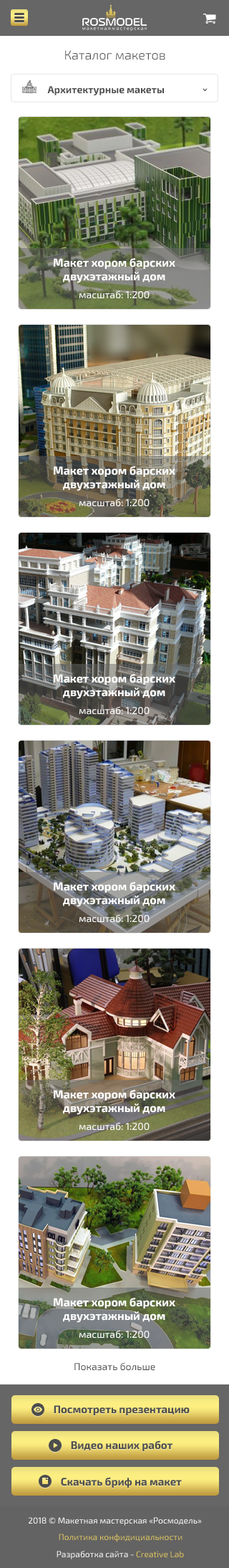
<style>
.page{position:relative;width:229px;height:1568px;background:#ffffff}
.page>*{position:absolute;margin:0}
.t1{font:12.9px "Exo2-Light";color:#4d4d4d}
.t2{font:10px "Exo2-Bold";color:#4d4d4d}
.t3{font:10px "Exo2-Bold";color:#4d4d4d;scale:0.6 1}
.t4{font:11.5px "Exo2-Bold";color:#ffffff}
.t5{font:10px "Exo2-Regular";color:#ffffff}
.t6{font:10px "Exo2-Regular";color:#4d4d4d}
</style>
<div class="page">
<p class="t1" style="left:65px;top:50px;width:101px;height:10px">Каталог макетов</p>
<p class="t2" style="left:47px;top:86px;width:117px;height:9px">Архитектурные макеты</p>
<p class="t3" style="left:203px;top:88px;width:5px;height:3px;rotate:90deg">&gt;</p>
<p class="t4" style="left:54px;top:258px;width:122px;height:25px;text-align:center">Макет хором барских<br>двухэтажный дом</p>
<p class="t5" style="left:80px;top:290px;width:70px;height:9px">масштаб: 1:200</p>
<p class="t4" style="left:54px;top:466px;width:122px;height:25px;text-align:center">Макет хором барских<br>двухэтажный дом</p>
<p class="t5" style="left:80px;top:498px;width:70px;height:9px">масштаб: 1:200</p>
<p class="t4" style="left:54px;top:674px;width:122px;height:25px;text-align:center">Макет хором барских<br>двухэтажный дом</p>
<p class="t5" style="left:80px;top:706px;width:70px;height:9px">масштаб: 1:200</p>
<p class="t4" style="left:54px;top:882px;width:122px;height:25px;text-align:center">Макет хором барских<br>двухэтажный дом</p>
<p class="t5" style="left:80px;top:914px;width:70px;height:9px">масштаб: 1:200</p>
<p class="t4" style="left:54px;top:1090px;width:122px;height:25px;text-align:center">Макет хором барских<br>двухэтажный дом</p>
<p class="t5" style="left:80px;top:1122px;width:70px;height:9px">масштаб: 1:200</p>
<p class="t4" style="left:54px;top:1298px;width:122px;height:25px;text-align:center">Макет хором барских<br>двухэтажный дом</p>
<p class="t5" style="left:80px;top:1330px;width:70px;height:9px">масштаб: 1:200</p>
<p class="t6" style="left:75px;top:1362px;width:81px;height:9px">Показать больше</p>
</div>
